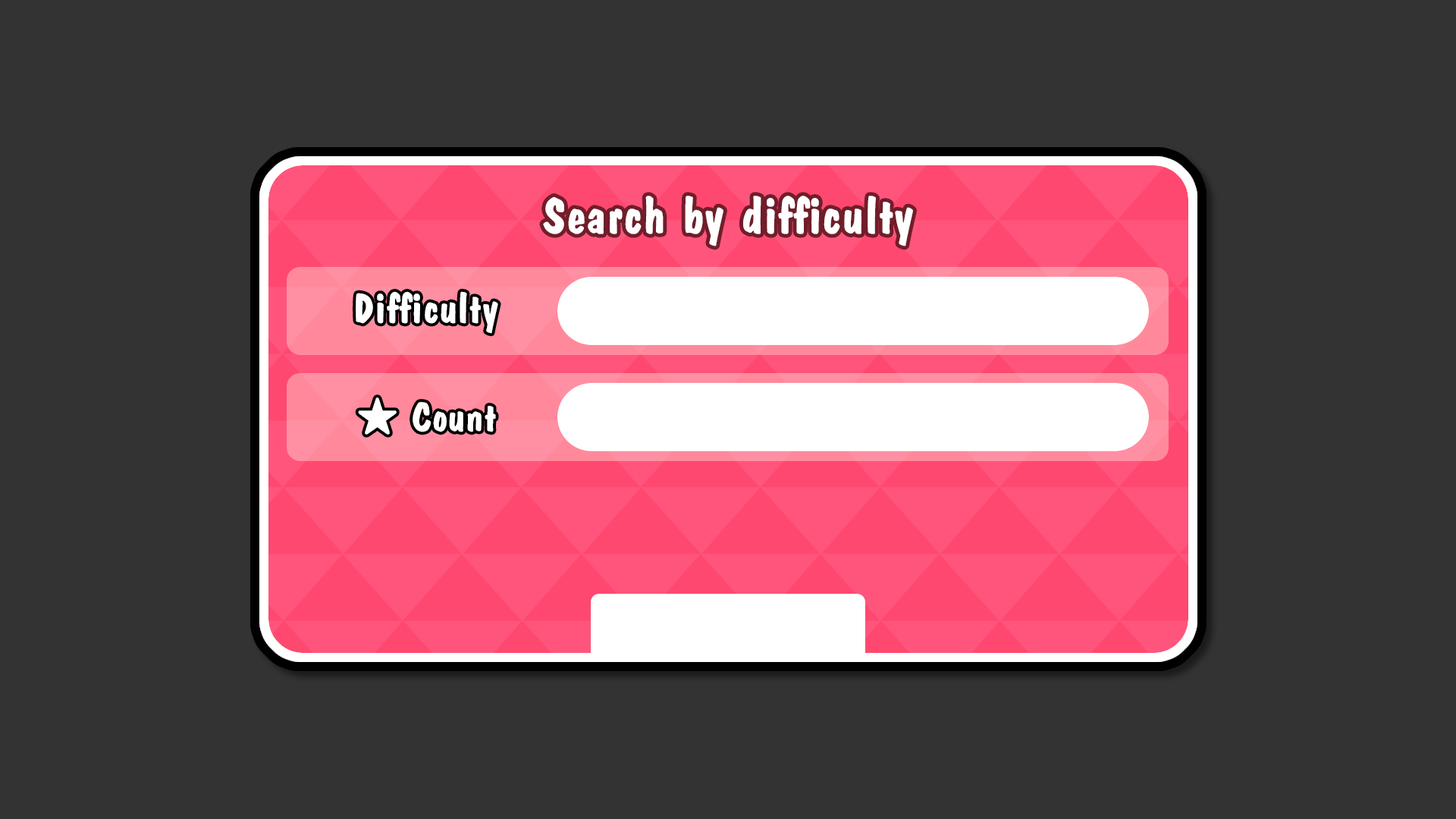
<style>
.page{position:relative;width:1456px;height:819px;background:#333333}
.page>*{position:absolute;margin:0}
.t1{font:51.7px "Eng-DFPKanteiryu-XB";color:#ffffff}
.t2{font:42.4px "Eng-DFPKanteiryu-XB";color:#ffffff}
.t3{font:41.3px "Eng-DFPKanteiryu-XB";color:#ffffff}
</style>
<div class="page">
<p class="t1" style="left:543px;top:196px;width:370px;height:50px">Search by difficulty</p>
<p class="t2" style="left:356px;top:291px;width:142px;height:43px">Difficulty</p>
<p class="t3" style="left:358px;top:397px;width:138px;height:38px">★ Count</p>
</div>
